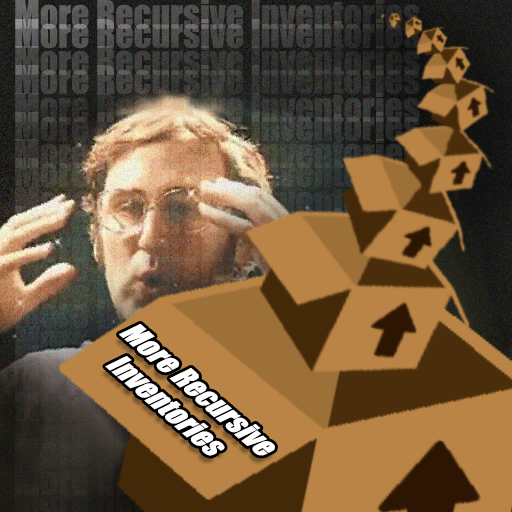
<style>
.page{position:relative;width:512px;height:512px}
.page>*{position:absolute;margin:0}
.t1{font:30px "Impact";color:#ffffff}
</style>
<div class="page">
<p class="t1" style="left:105px;top:324px;width:170px;height:132px;rotate:41deg">More Recursive Inventories</p>
</div>
